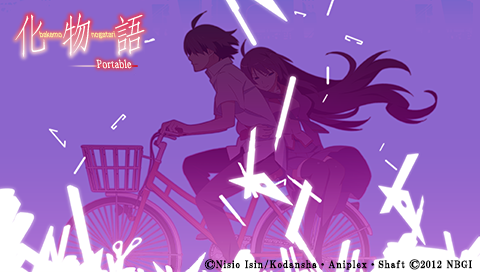
<style>
.page{position:relative;width:480px;height:272px;background:#8b65cc}
.page>*{position:absolute;margin:0}
.t1{font:91.1px "Typeface";letter-spacing:0.14em;color:#ffffff;scale:0.76 1}
.t2{font:91.1px "Typeface";letter-spacing:0.13em;color:#ffffff;scale:0.71 1}
.t3{font:91.1px "Typeface";letter-spacing:0.13em;color:#ffffff;scale:0.76 1}
.t4{font:7.5px "ShinGoPro-Regular";color:#fdeca0;font-weight:bold;scale:0.71 1}
.t5{font:10.9px "AdobeFangsongStd-Regular";letter-spacing:0.05em;color:#ffffff;scale:0.78 1}
.t6{font:10px "HGSMinchoB";letter-spacing:0.05em;color:#000000;font-weight:bold}
.t7{font:10px "HGPMinchoE";letter-spacing:0.05em;color:#000000;font-weight:bold}
</style>
<div class="page">
<p class="t1" style="left:15px;top:13px;width:130px;height:44px">a<span class="t2">b </span><span class="t3">c</span></p>
<p class="t4" style="left:39px;top:31px;width:77px;height:8px">bakemo                nogatari</p>
<p class="t5" style="left:96px;top:59px;width:36px;height:10px">Portable</p>
<p class="t6" style="left:204px;top:259px;width:268px;height:11px"><span class="t7">©</span>Nisio Isin/Kodansha・Aniplex・Shaft <span class="t7">©</span>2012 NBGI</p>
</div>
